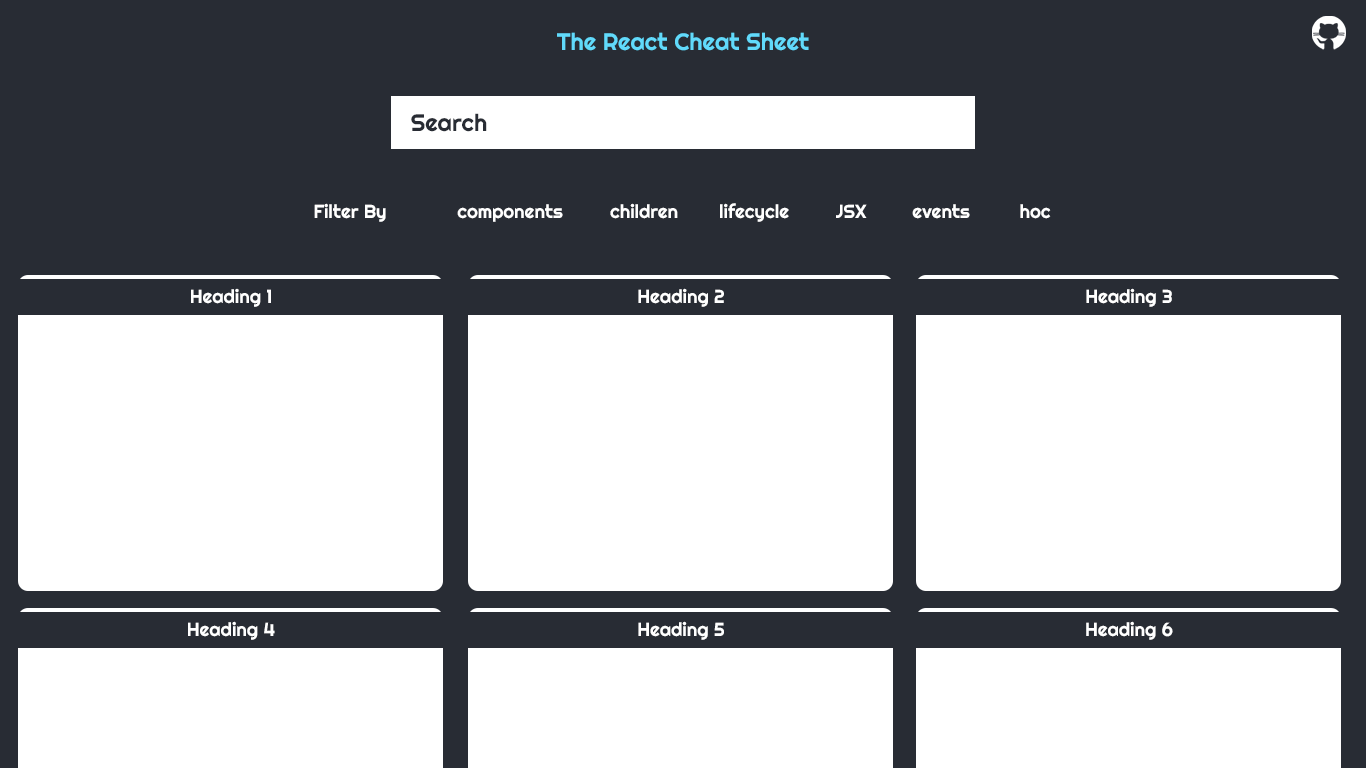
<style>
.page{position:relative;width:1366px;height:768px;background:#ffffff}
.page>*{position:absolute;margin:0}
.t1{font:23.7px "Righteous-Regular";color:#61dafb}
.t2{font:23.7px "Righteous-Regular";color:#282c34}
.t3{font:18.7px "Righteous-Regular";color:#ffffff}
</style>
<div class="page">
<p class="t1" style="left:557px;top:32px;width:252px;height:19px">The React Cheat Sheet</p>
<p class="t2" style="left:411px;top:113px;width:76px;height:19px">Search</p>
<p class="t3" style="left:314px;top:203px;width:72px;height:19px">Filter By</p>
<p class="t3" style="left:457px;top:204px;width:106px;height:18px">components</p>
<p class="t3" style="left:610px;top:203px;width:68px;height:16px">children</p>
<p class="t3" style="left:720px;top:203px;width:69px;height:19px">lifecycle</p>
<p class="t3" style="left:836px;top:204px;width:31px;height:14px">JSX</p>
<p class="t3" style="left:912px;top:204px;width:58px;height:15px">events</p>
<p class="t3" style="left:1020px;top:204px;width:31px;height:15px">hoc</p>
<p class="t3" style="left:191px;top:288px;width:80px;height:19px">Heading 1</p>
<p class="t3" style="left:638px;top:288px;width:86px;height:19px">Heading 2</p>
<p class="t3" style="left:1086px;top:288px;width:86px;height:19px">Heading 3</p>
<p class="t3" style="left:188px;top:621px;width:87px;height:19px">Heading 4</p>
<p class="t3" style="left:638px;top:621px;width:86px;height:19px">Heading 5</p>
<p class="t3" style="left:1086px;top:621px;width:87px;height:19px">Heading 6</p>
</div>
